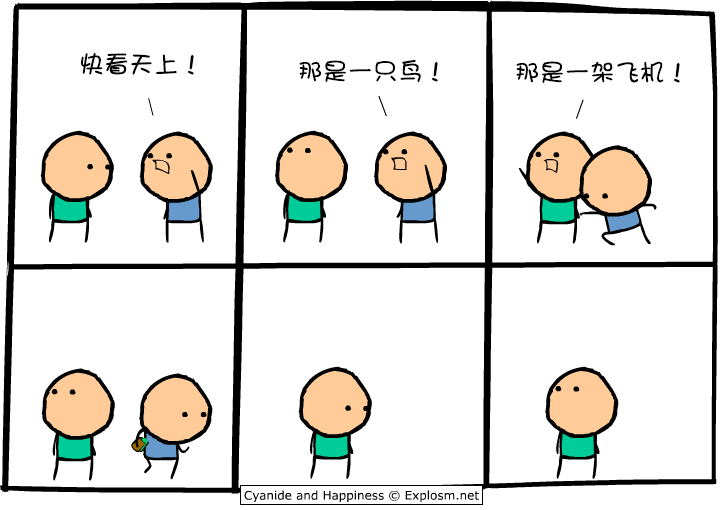
<style>
.page{position:relative;width:720px;height:510px;background:#ffffff}
.page>*{position:absolute;margin:0}
.t1{font:25px "DFGirl";color:#000000}
</style>
<div class="page">
<p class="t1" style="left:81px;top:53px;width:113px;height:22px">快看天上！</p>
<p class="t1" style="left:299px;top:60px;width:139px;height:23px">那是一只鸟！</p>
<p class="t1" style="left:516px;top:61px;width:164px;height:22px">那是一架飞机！</p>
</div>
